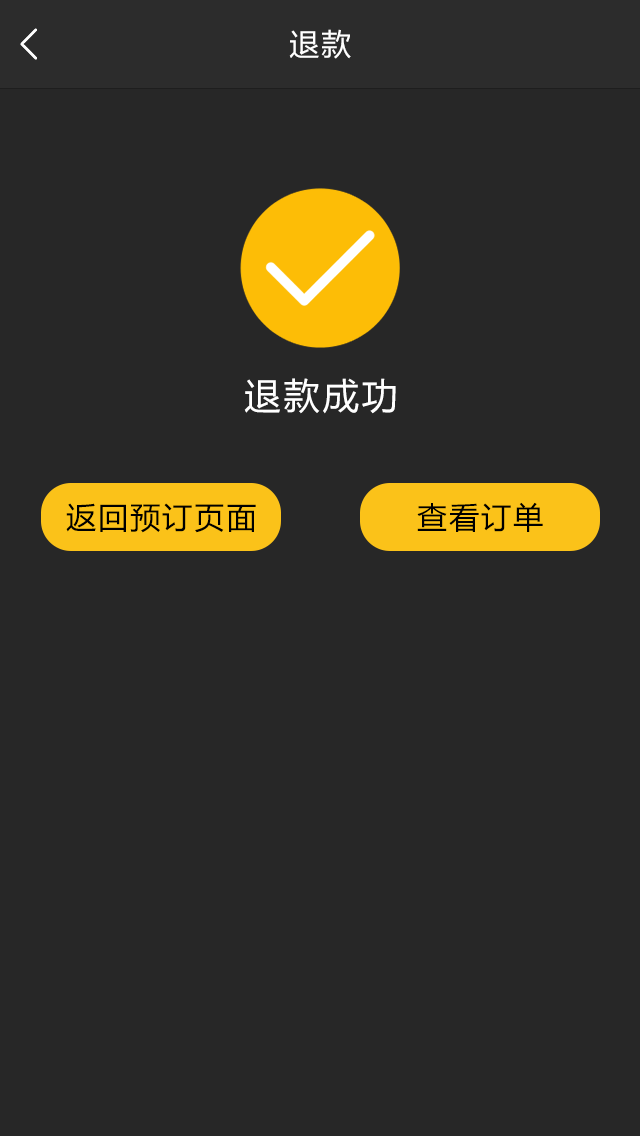
<style>
.page{position:relative;width:640px;height:1136px;background:#272727}
.page>*{position:absolute;margin:0}
.t1{font:30px "MicrosoftYaHei";letter-spacing:0.07em;color:#ffffff}
.t2{font:36px "MicrosoftYaHei";letter-spacing:0.07em;color:#ffffff}
.t3{font:30px "MicrosoftYaHei";letter-spacing:0.07em;color:#000000}
</style>
<div class="page">
<p class="t1" style="left:289px;top:29px;width:62px;height:30px">退款</p>
<p class="t2" style="left:244px;top:378px;width:152px;height:36px">退款成功</p>
<p class="t3" style="left:66px;top:503px;width:190px;height:30px">返回预订页面</p>
<p class="t3" style="left:417px;top:502px;width:126px;height:30px">查看订单</p>
</div>
